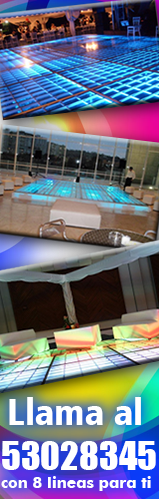
<style>
.page{position:relative;width:159px;height:499px}
.page>*{position:absolute;margin:0}
.t1{font:15.5px "FuturaBT-Bold";color:#ffffff}
.t2{font:37.1px "Impact";color:#ffffff}
.t3{font:37.1px "Humanist777BT-BlackCondensedB";color:#ffffff}
</style>
<div class="page">
<p class="t1" style="left:1px;top:397px;width:155px;height:94px"><span class="t2"> </span><span class="t3">Llama al<br></span><span class="t2">53028345<br></span>con 8 lineas para ti</p>
</div>
